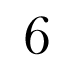
<style>
.page{position:relative;width:75px;height:75px;background:#ffffff}
.page>*{position:absolute;margin:0}
.t1{font:55px "BaskOldFace";color:#000000}
</style>
<div class="page">
<p class="t1" style="left:25px;top:16px;width:24px;height:39px">6</p>
</div>
